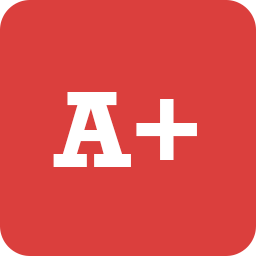
<style>
.page{position:relative;width:256px;height:256px;background:#db3f3d}
.page>*{position:absolute;margin:0}
.t1{font:110px "Rockwell-Bold";color:#ffffff}
</style>
<div class="page">
<p class="t1" style="left:53px;top:92px;width:144px;height:75px">A+</p>
</div>
